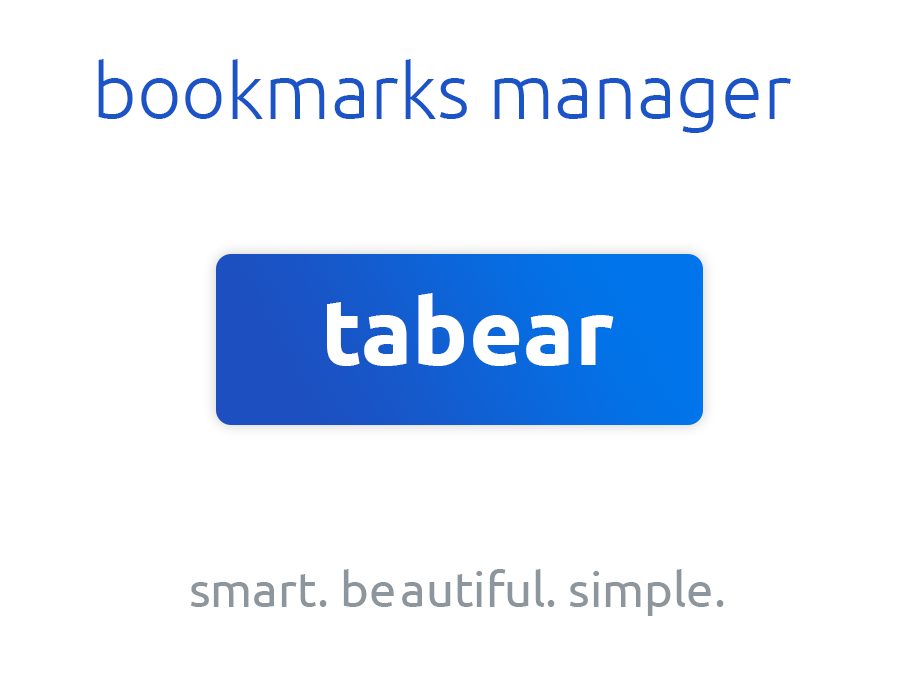
<style>
.page{position:relative;width:920px;height:680px;background:#ffffff}
.page>*{position:absolute;margin:0}
.t1{font:77.1px "Ubuntu-Light";color:#1a54c6}
.t2{font:93.5px "Ubuntu-Bold";color:#ffffff}
.t3{font:48.8px "Ubuntu";color:#8d959d}
</style>
<div class="page">
<p class="t1" style="left:98px;top:59px;width:693px;height:74px">bookmarks manager</p>
<p class="t2" style="left:327px;top:293px;width:287px;height:73px">tabear</p>
<p class="t3" style="left:191px;top:569px;width:533px;height:47px">smart. beautiful. simple.</p>
</div>
